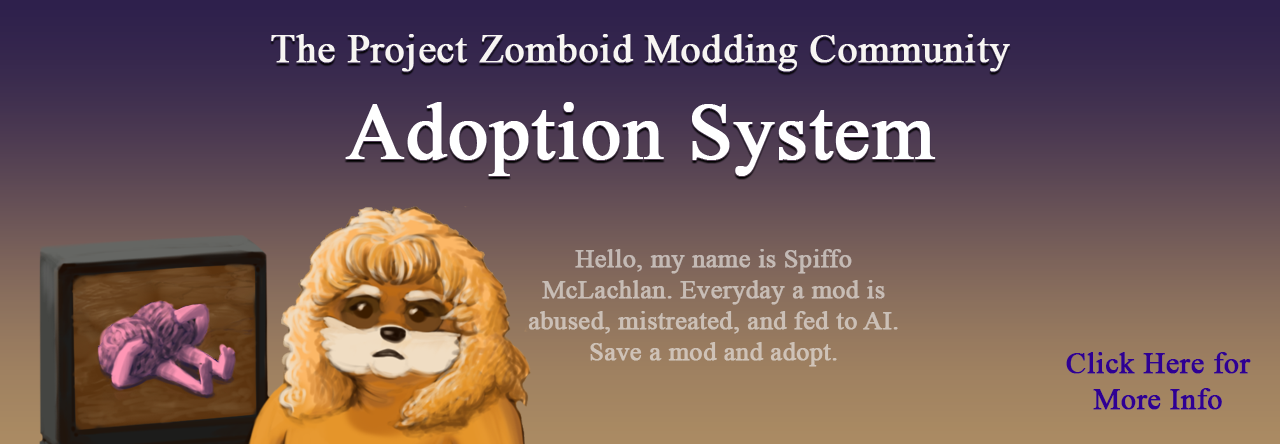
<style>
.page{position:relative;width:1280px;height:444px}
.page>*{position:absolute;margin:0}
.t1{font:40px "TimesNewRomanPSMT";color:#f7f5f2;font-weight:bold}
.t2{font:80px "TimesNewRomanPSMT";color:#ffffff;font-weight:bold}
.t3{font:25.9px "TimesNewRomanPSMT";color:#c9beb6;font-weight:bold}
.t4{font:30px "TimesNewRomanPSMT";color:#2f0093;font-weight:bold}
</style>
<div class="page">
<p class="t1" style="left:271px;top:34px;width:739px;height:142px;text-align:center">The Project Zomboid Modding Community<br><span class="t2">Adoption System</span></p>
<p class="t3" style="left:528px;top:249px;width:370px;height:118px;text-align:center">Hello, my name is Spiffo McLachlan. Everyday a mod is abused, mistreated, and fed to AI. Save a mod and adopt.</p>
<p class="t4" style="left:1066px;top:352px;width:185px;height:58px;text-align:center">Click Here for More Info</p>
</div>
